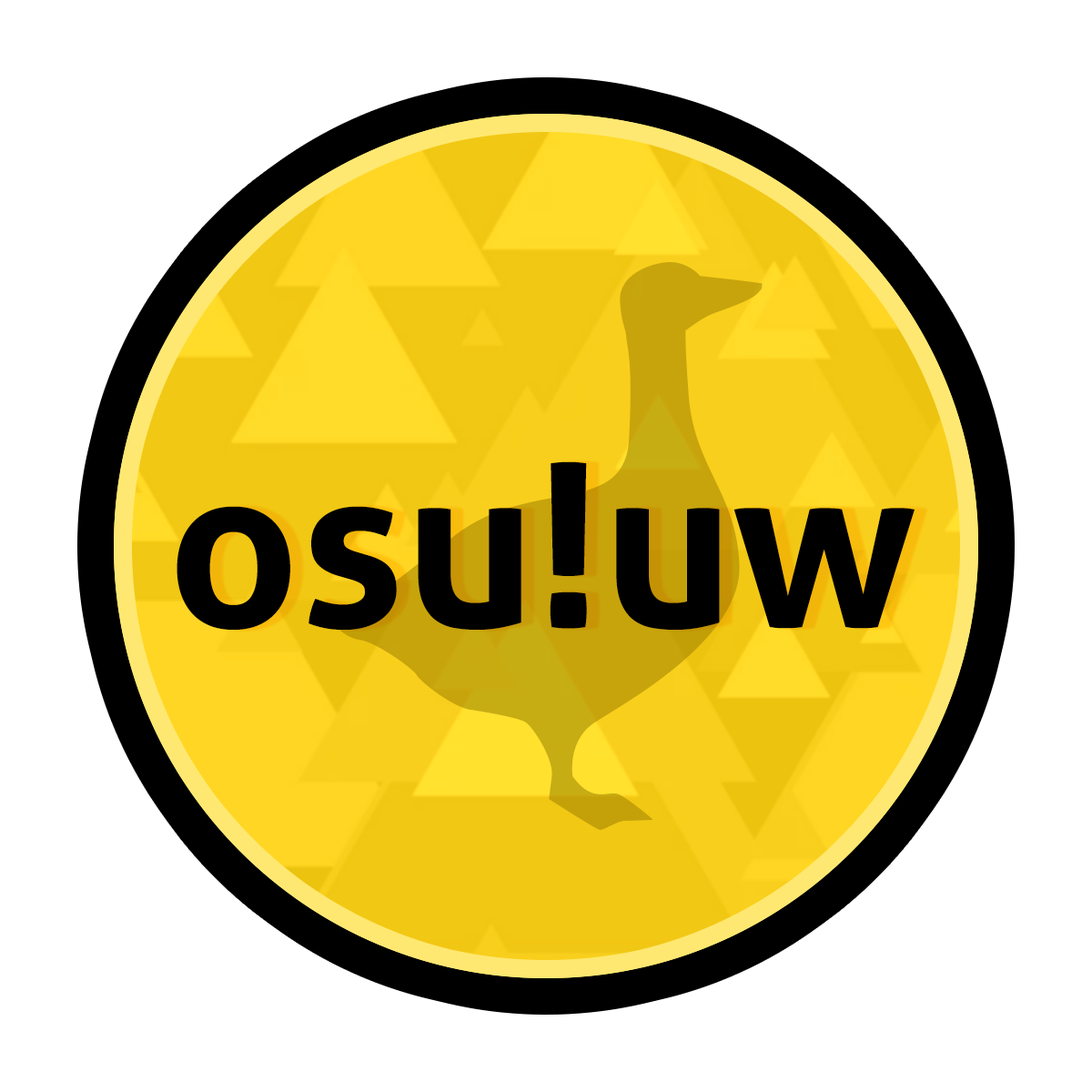
<style>
.page{position:relative;width:1092px;height:1092px;background:#ffffff}
.page>*{position:absolute;margin:0}
.t1{font:227.5px "Aller-Bold";color:#000000}
</style>
<div class="page">
<p class="t1" style="left:177px;top:461px;width:738px;height:169px">osu!uw</p>
</div>
